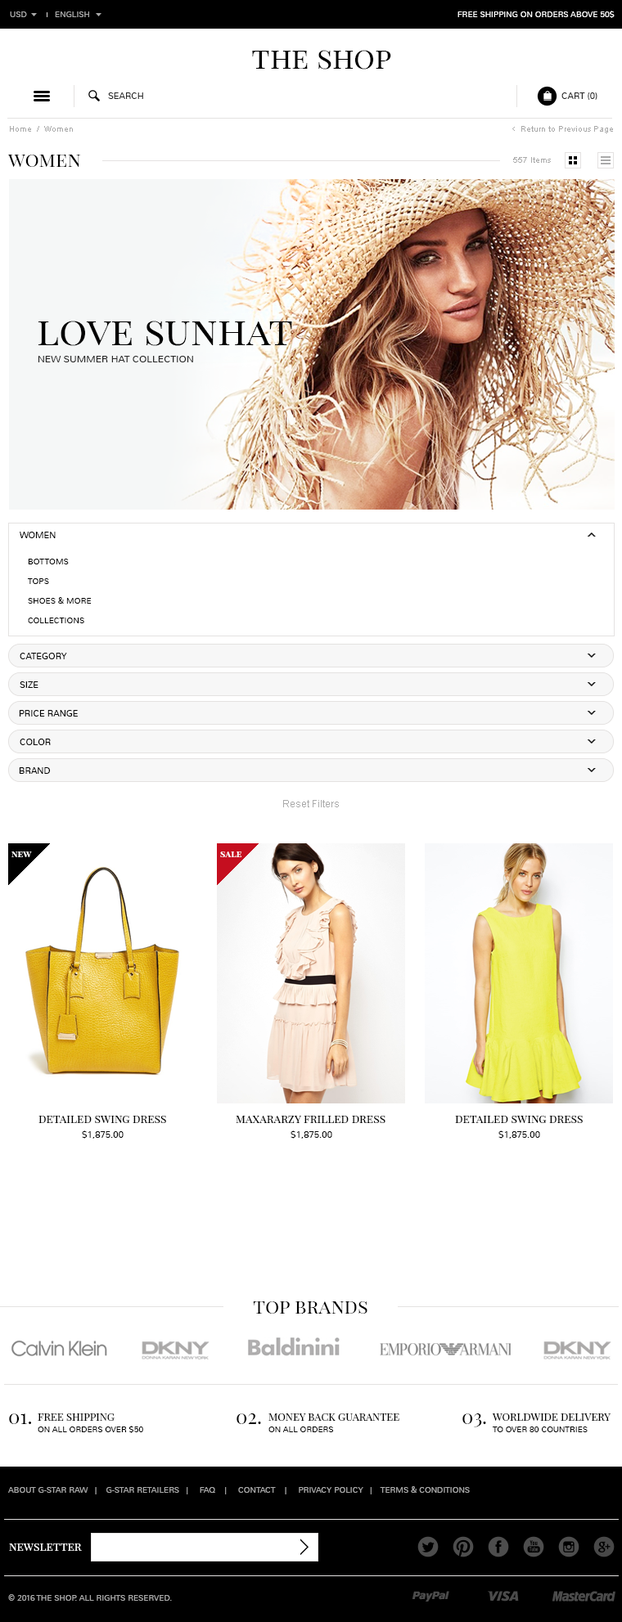
<style>
.page{position:relative;width:622px;height:1622px;background:#ffffff}
.page>*{position:absolute;margin:0}
.t1{font:8.2px "Nunito-Light";color:#aaaaaa;text-transform:uppercase}
.t2{font:8.2px "Nunito-Light";color:#ffffff;text-transform:uppercase}
.t3{font:29.5px "PlayfairDisplaySC-Regular";color:#000000}
.t4{font:9px "Nunito-Light";color:#282828;text-transform:uppercase}
.t5{font:8.2px "ArialMT";color:#aaaaaa}
.t6{font:9.8px "Cabin-Regular";color:#aaaaaa}
.t7{font:19.6px "PlayfairDisplaySC-Regular";color:#000000}
.t8{font:39.3px "PlayfairDisplaySC-Regular";color:#000000}
.t9{font:9.8px "Nunito-Light";color:#282828;text-transform:uppercase}
.t10{font:9px "Nunito-Light";color:#000000;text-transform:uppercase}
.t11{font:8.2px/19.6px "Nunito-Light";color:#000000;text-transform:uppercase}
.t12{font:9.8px "ArialMT";color:#aaaaaa}
.t13{font:9px "PlayfairDisplaySC-Bold";color:#ffffff}
.t14{font:11.5px "PlayfairDisplaySC-Regular";color:#000000}
.t15{font:9px "Nunito-Light";color:#000000}
.t16{font:10.6px "PlayfairDisplaySC-Regular";color:#000000;text-transform:uppercase}
.t17{font:8.2px "Nunito-Light";color:#000000;text-transform:uppercase}
.t18{font:11.5px "PlayfairDisplaySC-Regular";color:#ffffff}
</style>
<div class="page">
<p class="t1" style="left:10px;top:11px;width:17px;height:6px">usD</p>
<p class="t1" style="left:55px;top:11px;width:34px;height:6px">English</p>
<p class="t2" style="left:457px;top:11px;width:157px;height:7px">free shipping on orders above 50$</p>
<p class="t3" style="left:252px;top:50px;width:139px;height:20px">the shop</p>
<p class="t4" style="left:108px;top:92px;width:35px;height:7px">search</p>
<p class="t4" style="left:561px;top:92px;width:36px;height:8px">Cart (0)</p>
<p class="t5" style="left:10px;top:126px;width:63px;height:6px">Home  /  Women</p>
<p class="t6" style="left:512px;top:127px;width:3px;height:4px">&lt;</p>
<p class="t5" style="left:521px;top:126px;width:92px;height:7px">Return to Previous Page</p>
<p class="t7" style="left:7px;top:155px;width:74px;height:12px">women</p>
<p class="t5" style="left:513px;top:157px;width:38px;height:6px">557 Items</p>
<p class="t8" style="left:38px;top:321px;width:254px;height:25px">love sunhat</p>
<p class="t9" style="left:38px;top:356px;width:155px;height:6px">new summer hat collection</p>
<p class="t10" style="left:20px;top:532px;width:36px;height:6px">women</p>
<p class="t11" style="left:28px;top:559px;width:64px;height:64px">Bottoms<br>Tops<br>Shoes &amp; more<br>Collections</p>
<p class="t10" style="left:20px;top:653px;width:47px;height:6px">category</p>
<p class="t10" style="left:20px;top:682px;width:18px;height:6px">size</p>
<p class="t10" style="left:19px;top:710px;width:59px;height:7px">price range</p>
<p class="t10" style="left:20px;top:739px;width:31px;height:6px">color</p>
<p class="t10" style="left:19px;top:767px;width:31px;height:7px">brand</p>
<p class="t12" style="left:283px;top:800px;width:56px;height:8px">Reset Filters</p>
<p class="t13" style="left:11px;top:852px;width:21px;height:5px">new</p>
<p class="t13" style="left:220px;top:852px;width:21px;height:5px">sale</p>
<p class="t14" style="left:38px;top:1116px;width:128px;height:7px">detailed swing dress</p>
<p class="t14" style="left:236px;top:1116px;width:149px;height:7px">maxararzy frilled dress</p>
<p class="t14" style="left:455px;top:1116px;width:128px;height:7px">detailed swing dress</p>
<p class="t15" style="left:82px;top:1131px;width:42px;height:8px">$1,875.00</p>
<p class="t15" style="left:290px;top:1131px;width:42px;height:8px">$1,875.00</p>
<p class="t15" style="left:498px;top:1131px;width:42px;height:8px">$1,875.00</p>
<p class="t7" style="left:253px;top:1302px;width:114px;height:12px">top brands</p>
<p class="t7" style="left:9px;top:1414px;width:22px;height:10px">01.</p>
<p class="t16" style="left:38px;top:1414px;width:77px;height:7px">Free Shipping</p>
<p class="t7" style="left:236px;top:1414px;width:25px;height:10px">02.</p>
<p class="t16" style="left:268px;top:1414px;width:131px;height:7px">Money back guarantee</p>
<p class="t7" style="left:462px;top:1414px;width:24px;height:14px">03.</p>
<p class="t16" style="left:492px;top:1414px;width:118px;height:7px">Worldwide Delivery</p>
<p class="t17" style="left:38px;top:1426px;width:105px;height:7px">On all orders over $50</p>
<p class="t17" style="left:268px;top:1427px;width:66px;height:6px">On all orders</p>
<p class="t17" style="left:493px;top:1427px;width:94px;height:6px">To over 80 countries</p>
<p class="t1" style="left:8px;top:1487px;width:462px;height:8px">About G-Star Raw   |    G-Star Retailers   |     FAQ    |     Contact    |     Privacy Policy   |    Terms &amp; Conditions</p>
<p class="t18" style="left:9px;top:1544px;width:73px;height:7px">newsletter</p>
<p class="t1" style="left:8px;top:1595px;width:164px;height:6px">© 2016 the shop. All Rights Reserved.</p>
</div>
